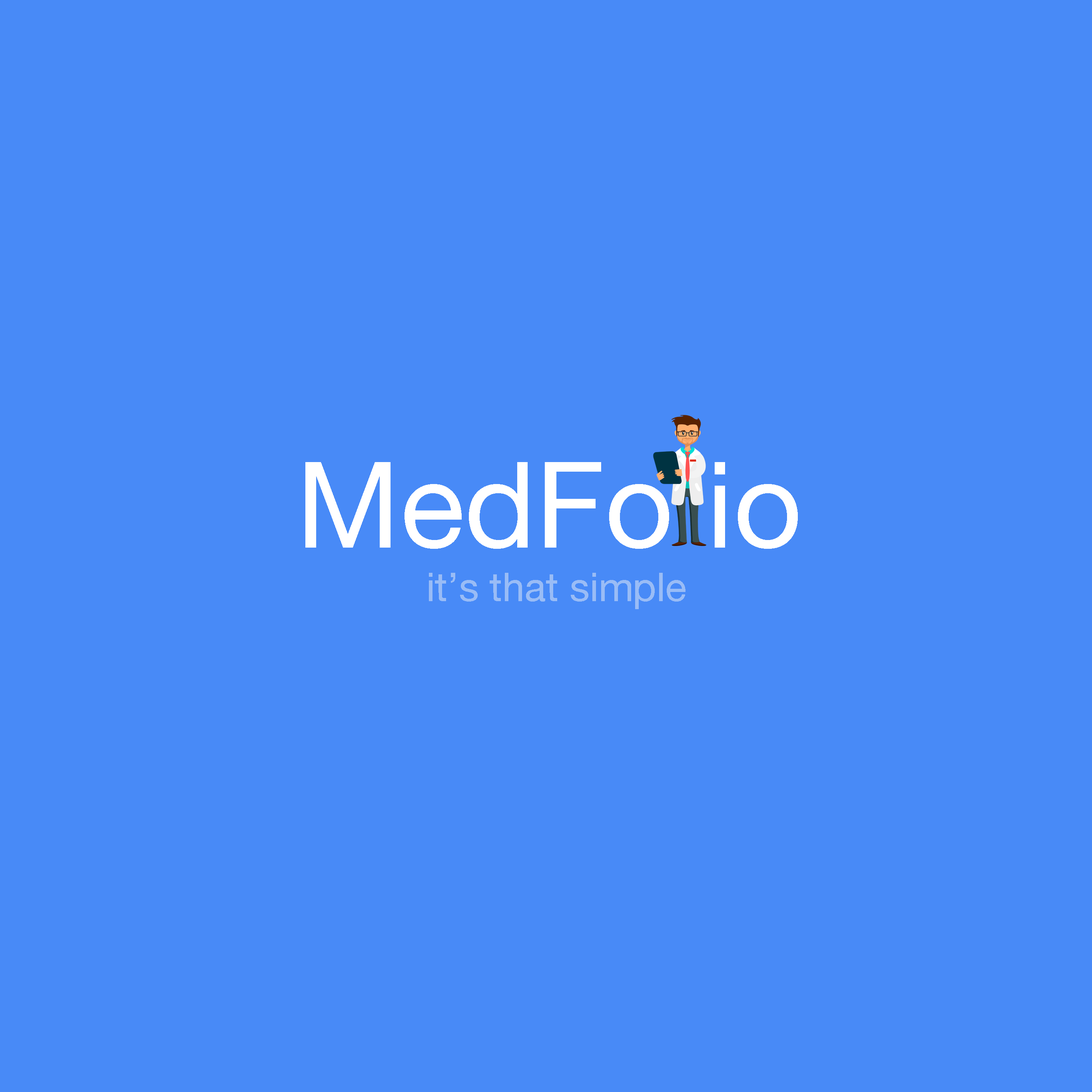
<style>
.page{position:relative;width:1092px;height:1092px;background:#488af7}
.page>*{position:absolute;margin:0}
.t1{font:119.9px "HelveticaNeue";color:#ffffff}
.t2{font:40px "HelveticaNeue";color:#99bcf6}
</style>
<div class="page">
<p class="t1" style="left:305px;top:462px;width:493px;height:87px">MedFo io</p>
<p class="t2" style="left:429px;top:573px;width:256px;height:36px">it’s that simple</p>
</div>
